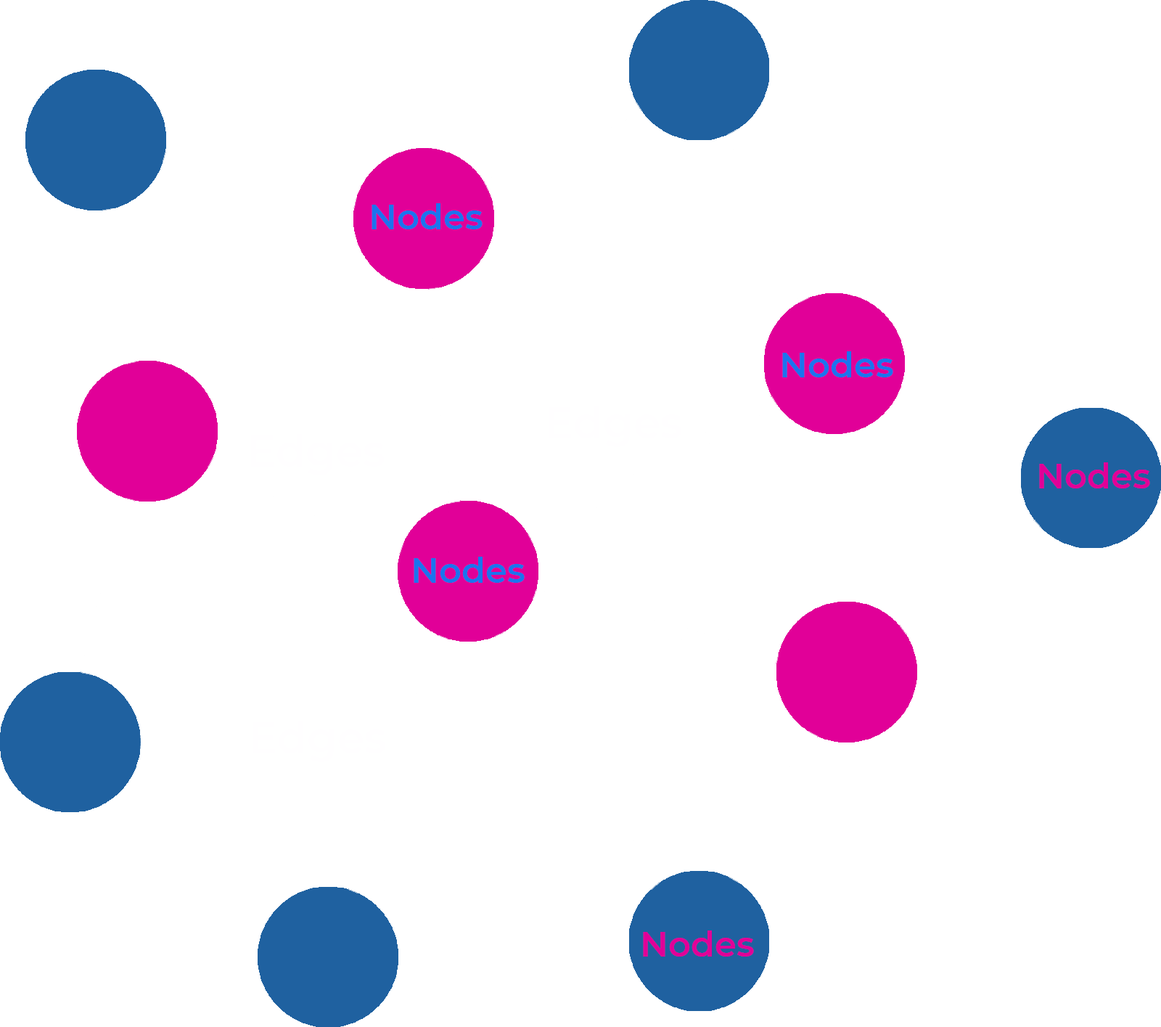
<style>
.page{position:relative;width:1161px;height:1027px;background:#ffffff}
.page>*{position:absolute;margin:0}
.t1{font:34.8px "Montserrat-SemiBold";color:#1b74ee}
.t2{font:34.8px "Montserrat-SemiBold";color:#e10098}
</style>
<div class="page">
<p class="t1" style="left:372px;top:203px;width:111px;height:26px">Nodes</p>
<p class="t1" style="left:782px;top:351px;width:111px;height:26px">Nodes</p>
<p class="t2" style="left:1039px;top:462px;width:111px;height:26px">Nodes</p>
<p class="t1" style="left:414px;top:557px;width:111px;height:26px">Nodes</p>
<p class="t2" style="left:643px;top:930px;width:111px;height:27px">Nodes</p>
</div>
